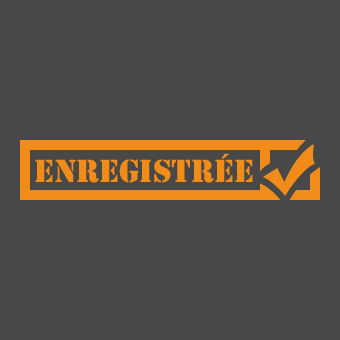
<style>
.page{position:relative;width:340px;height:340px;background:#484848}
.page>*{position:absolute;margin:0}
.t1{font:33.2px "Stencil";color:#f28c18}
</style>
<div class="page">
<p class="t1" style="left:35px;top:153px;width:218px;height:30px">Enregistrée</p>
</div>
